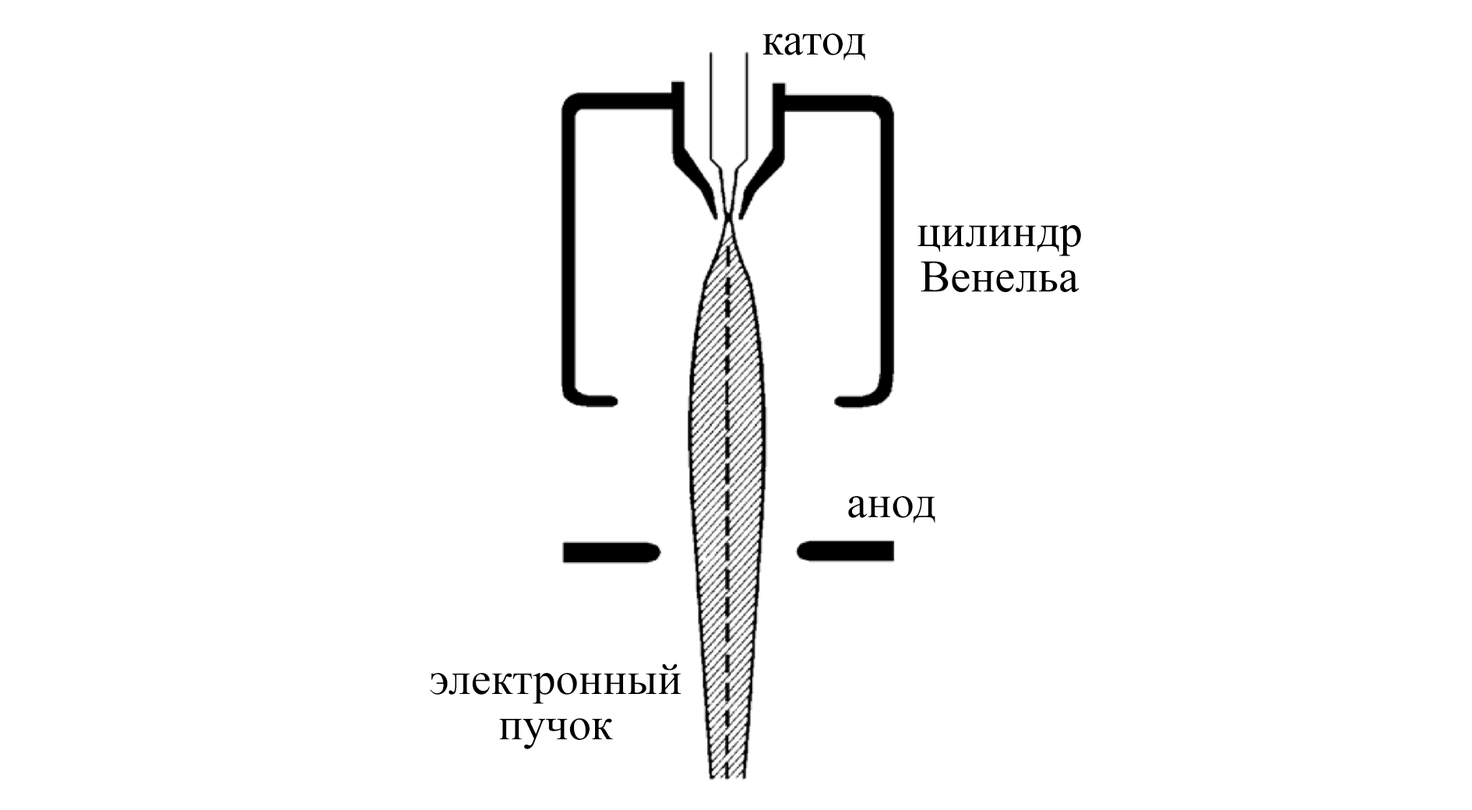
<style>
.page{position:relative;width:1472px;height:810px;background:#ffffff}
.page>*{position:absolute;margin:0}
.t1{font:45.4px "TimesNewRomanPSMT";color:#000000}
.t2{font:45.4px/45.4px "TimesNewRomanPSMT";color:#000000}
</style>
<div class="page">
<p class="t1" style="left:763px;top:33px;width:102px;height:28px">катод</p>
<p class="t1" style="left:848px;top:496px;width:87px;height:27px">анод</p>
<p class="t2" style="left:430px;top:664px;width:251px;height:85px;text-align:center">электронный<br>пучок</p>
</div>
